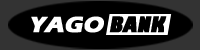
<style>
.page{position:relative;width:200px;height:50px;background:#000000}
.page>*{position:absolute;margin:0}
.t1{font:23px "ErasITC-Bold";color:#ffffff;font-weight:bold;font-style:italic}
.t2{font:21px "GillSans-UltraBoldCondensed";color:#000000;font-weight:bold;font-style:italic}
</style>
<div class="page">
<p class="t1" style="left:31px;top:16px;width:73px;height:17px">YAGO</p>
<p class="t2" style="left:109px;top:16px;width:58px;height:17px">BANK</p>
</div>
